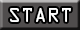
<style>
.page{position:relative;width:80px;height:30px;background:#504d4d}
.page>*{position:absolute;margin:0}
.t1{font:18px "OCRAStd";color:#ffffff}
</style>
<div class="page">
<p class="t1" style="left:10px;top:8px;width:61px;height:14px">START</p>
</div>
